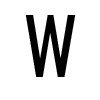
<style>
.page{position:relative;width:100px;height:100px;background:#ffffff}
.page>*{position:absolute;margin:0}
.t1{font:100px "TwCenMT-Condensed";color:#000000}
</style>
<div class="page">
<p class="t1" style="left:25px;top:15px;width:51px;height:62px">W</p>
</div>
